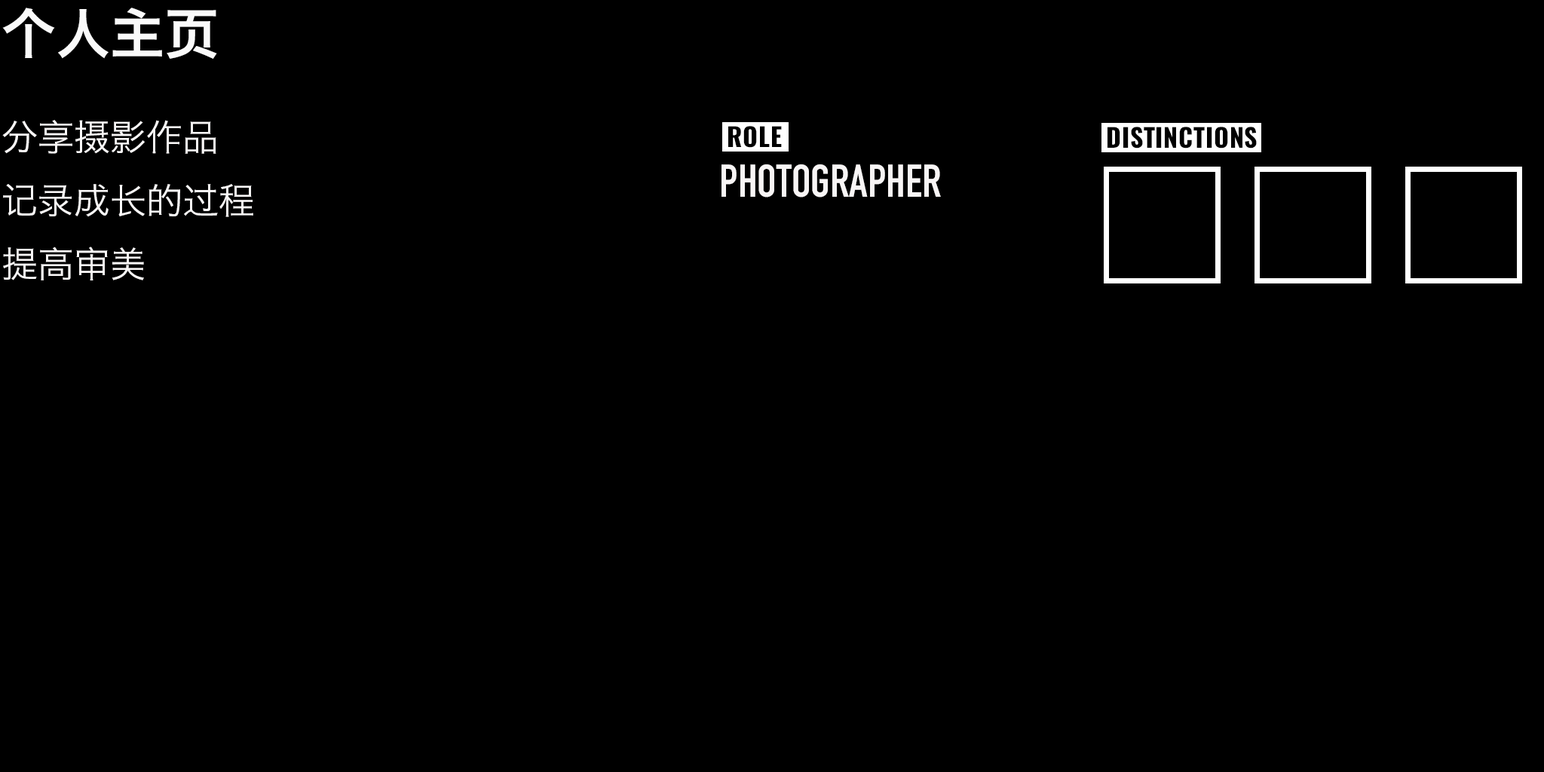
<style>
.page{position:relative;width:1544px;height:772px;background:#000000}
.page>*{position:absolute;margin:0}
.t1{font:54.3px "HiraginoSansGB-W6";color:#fafafa}
.t2{font:36.2px "HiraginoSansGB-W3";color:#f9f7f7}
.t3{font:45.2px "DINCondensed-Bold";color:#f8f5f5}
</style>
<div class="page">
<p class="t1" style="left:2px;top:8px;width:215px;height:51px">个人主页</p>
<p class="t2" style="left:2px;top:120px;width:251px;height:161px">分享摄影作品<br>记录成长的过程<br>提高审美</p>
<p class="t3" style="left:722px;top:164px;width:219px;height:34px">PHOTOGRAPHER</p>
</div>
